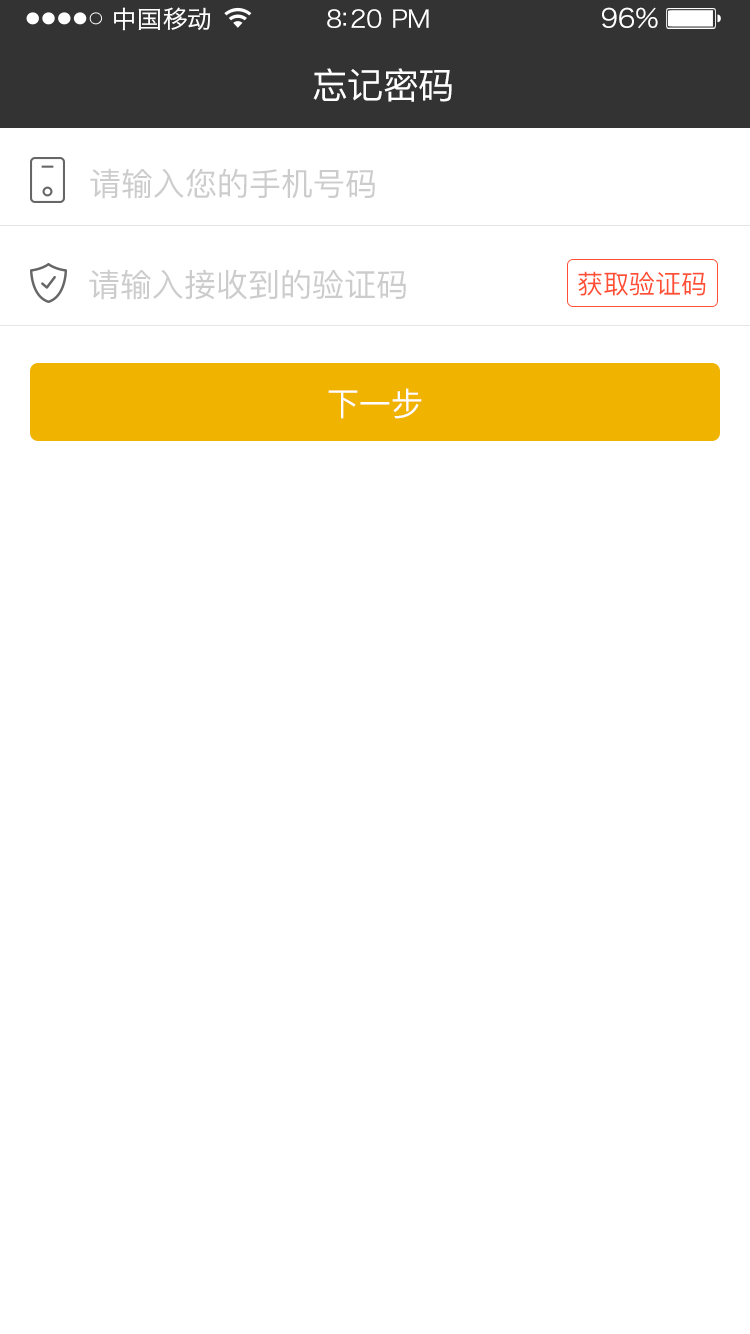
<style>
.page{position:relative;width:750px;height:1334px;background:#ffffff}
.page>*{position:absolute;margin:0}
.t1{font:24px "HiraginoSansGB-W3";letter-spacing:0.02em;color:#ffffff;scale:1.03 1}
.t2{font:24px "HiraginoSansGB-W3";letter-spacing:-0.02em;color:#ffffff;scale:1.03 1}
.t3{font:26.2px "HiraginoSansGB-W3";letter-spacing:-0.02em;color:#ffffff;scale:1.03 1}
.t4{font:36px "PingFangSC-Regular";letter-spacing:-0.02em;color:#ffffff}
.t5{font:32px "PingFangSC-Regular";color:#cccccc}
.t6{font:26px "PingFangSC-Regular";color:#ff5036}
.t7{font:32px "PingFangSC-Regular";color:#ffffff}
</style>
<div class="page">
<p class="t1" style="left:114px;top:7px;width:97px;height:24px">中国移动</p>
<p class="t2" style="left:327px;top:9px;width:102px;height:19px">8:20 PM</p>
<p class="t3" style="left:602px;top:7px;width:56px;height:22px">96%</p>
<p class="t4" style="left:313px;top:68px;width:139px;height:34px">忘记密码</p>
<p class="t5" style="left:90px;top:168px;width:285px;height:31px">请输入您的手机号码</p>
<p class="t5" style="left:89px;top:269px;width:317px;height:31px">请输入接收到的验证码</p>
<p class="t6" style="left:578px;top:271px;width:128px;height:25px">获取验证码</p>
<p class="t7" style="left:328px;top:388px;width:94px;height:31px">下一步</p>
</div>
